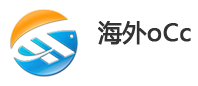
<style>
.page{position:relative;width:198px;height:86px;background:#ffffff}
.page>*{position:absolute;margin:0}
.t1{font:24px "MicrosoftYaHei";color:#333333;font-weight:bold}
</style>
<div class="page">
<p class="t1" style="left:98px;top:21px;width:93px;height:24px">海外oCc</p>
</div>
